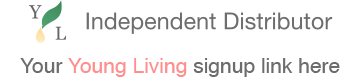
<style>
.page{position:relative;width:360px;height:77px;background:#ffffff}
.page>*{position:absolute;margin:0}
.t1{font:21px "Helvetica";color:#6c6c6c}
.t2{font:21px "Helvetica";color:#ff8e8e}
</style>
<div class="page">
<p class="t1" style="left:20px;top:58px;width:320px;height:19px">Your<span class="t2"> Young Living </span>signup link here</p>
</div>
